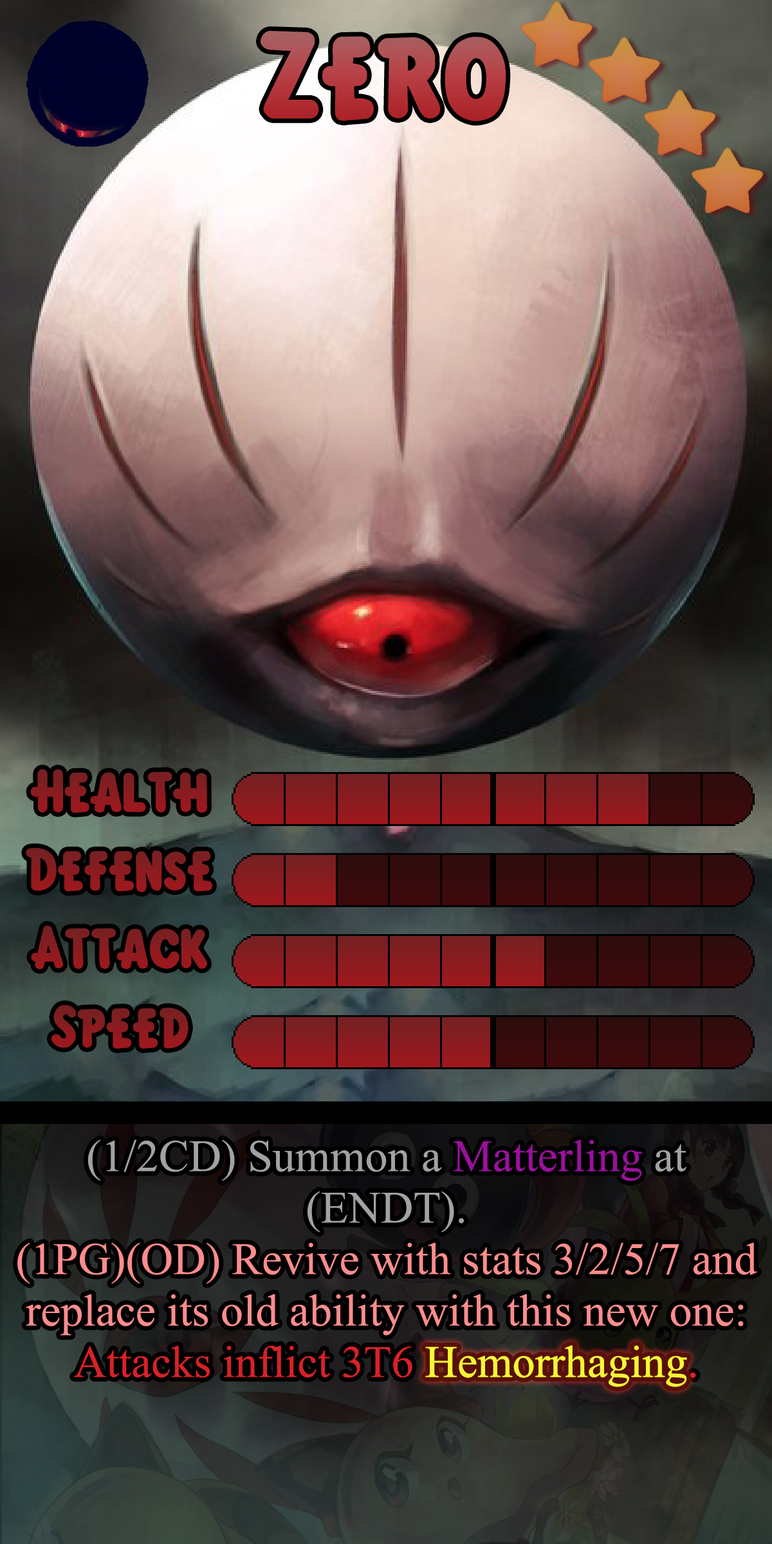
<style>
.page{position:relative;width:772px;height:1544px}
.page>*{position:absolute;margin:0}
.t1{font:194.3px "KirbyClassic"}
.t2{font:92.7px "KirbyClassic";color:#8b1c1f}
.t3{font:92.7px "KirbyClassic";color:#8a1c20}
.t4{font:92.7px "KirbyClassic";color:#891c20}
.t5{font:77.2px/51.5px "TimesNewRomanPSMT";color:#ff8c8c}
.t6{font:77.2px/51.5px "TimesNewRomanPSMT";color:#a2a2a2}
.t7{font:77.2px/51.5px "TimesNewRomanPSMT";color:#9b109d}
.t8{font:77.2px/51.5px "TimesNewRomanPSMT";color:#d92126}
.t9{font:77.2px/51.5px "TimesNewRomanPSMT";color:#f0ff00}
.t10{font:77.2px "TimesNewRomanPSMT";color:#f2f934}
</style>
<div class="page">
<p class="t1" style="left:260px;top:31px;width:246px;height:91px">Zero</p>
<p class="t2" style="left:30px;top:769px;width:178px;height:44px">Health</p>
<p class="t3" style="left:26px;top:848px;width:186px;height:44px">Defense</p>
<p class="t2" style="left:31px;top:925px;width:176px;height:45px">Attack</p>
<p class="t4" style="left:51px;top:1005px;width:138px;height:44px">Speed</p>
<p class="t5" style="left:17px;top:1140px;width:740px;height:247px;text-align:center"><span class="t6">(1/2CD) Summon a </span><span class="t7">Matterling </span><span class="t6">at (ENDT).<br></span>(1PG)(OD) Revive with stats 3/2/5/7 and replace its old ability with this new one:<br><span class="t8">Attacks inflict 3T6 </span><span class="t9">Hemorrhaging</span><span class="t8">.</span></p>
<p class="t10" style="left:425px;top:1345px;width:262px;height:42px">Hemorrhaging</p>
</div>
